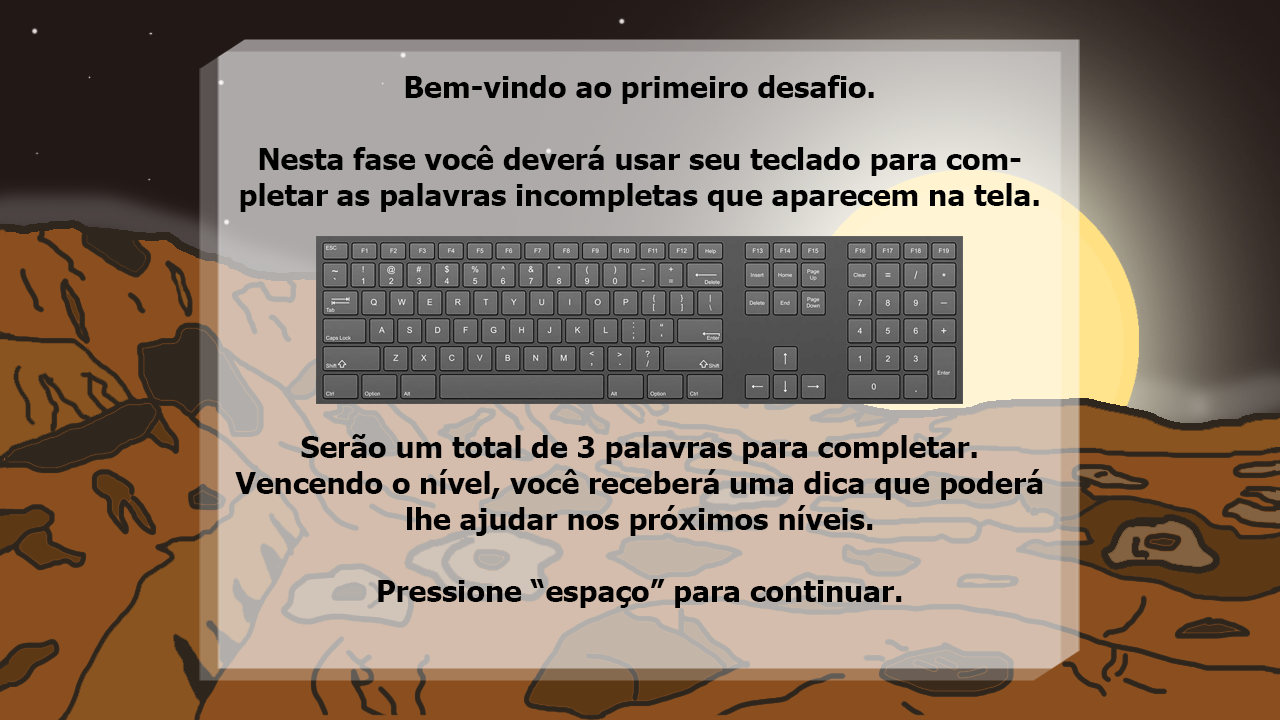
<style>
.page{position:relative;width:1280px;height:720px}
.page>*{position:absolute;margin:0}
.t1{font:30px "Tahoma-Bold";color:#000000}
</style>
<div class="page">
<p class="t1" style="left:235px;top:75px;width:808px;height:461px;text-align:center">Bem-vindo ao primeiro desafio.<br><br>Nesta fase você deverá usar seu teclado para completar as palavras incompletas que aparecem na tela.<br><br><br><br><br><br><br>Serão um total de 3 palavras para completar.<br>Vencendo o nível, você receberá uma dica que poderá lhe ajudar nos próximos níveis.</p>
<p class="t1" style="left:378px;top:579px;width:524px;height:29px">Pressione “espaço” para continuar.</p>
</div>
